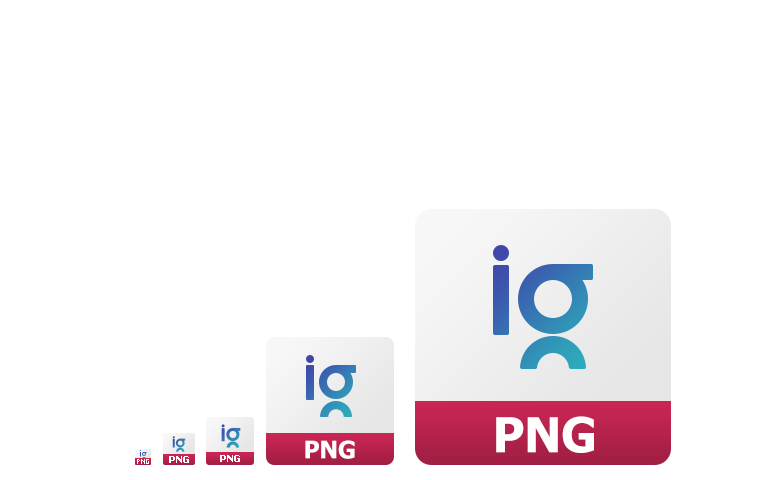
<style>
.page{position:relative;width:768px;height:480px;background:#ffffff}
.page>*{position:absolute;margin:0}
.t1{font:48px "Tahoma-Bold";color:#ffffff}
.t2{font:24px "Tahoma-Bold";color:#ffffff}
.t3{font:10px "Tahoma-Bold";color:#ffffff}
</style>
<div class="page">
<p class="t1" style="left:496px;top:416px;width:98px;height:37px">PNG</p>
<p class="t2" style="left:305px;top:440px;width:50px;height:19px">PNG</p>
<p class="t3" style="left:169px;top:456px;width:20px;height:7px">PNG</p>
<p class="t3" style="left:220px;top:455px;width:20px;height:7px">PNG</p>
</div>
